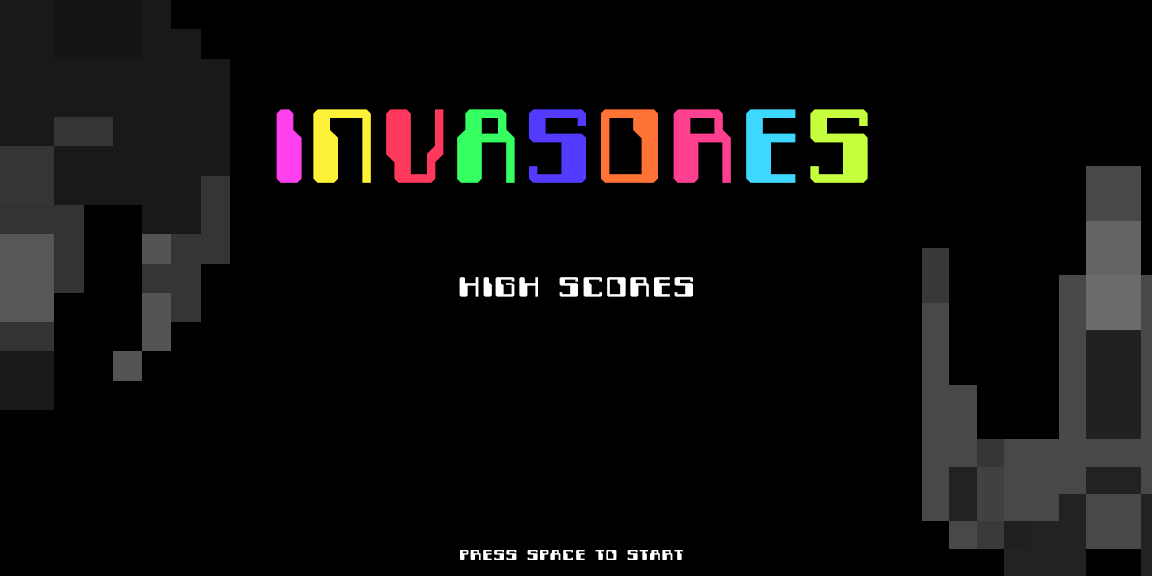
<style>
.page{position:relative;width:1152px;height:576px;background:#000000}
.page>*{position:absolute;margin:0}
.t1{font:122px "Computerfont";letter-spacing:0.035em;color:#ff40ef}
.t2{font:122px "Computerfont";letter-spacing:0.035em;color:#fef238}
.t3{font:122px "Computerfont";letter-spacing:0.035em;color:#ff385d}
.t4{font:122px "Computerfont";letter-spacing:0.035em;color:#36ff61}
.t5{font:122px "Computerfont";letter-spacing:0.035em;color:#523bff}
.t6{font:122px "Computerfont";letter-spacing:0.035em;color:#ff7336}
.t7{font:122px "Computerfont";letter-spacing:0.035em;color:#ff3f90}
.t8{font:122px "Computerfont";letter-spacing:0.035em;color:#3ed8ff}
.t9{font:122px "Computerfont";letter-spacing:0.035em;color:#c6ff3d}
.t10{font:32px "Computerfont";letter-spacing:0.035em;color:#ffffff;scale:1.23 1}
.t11{font:17px "Computerfont";letter-spacing:0.035em;color:#ffffff;scale:1.23 1}
</style>
<div class="page">
<p class="t1" style="left:276px;top:109px;width:592px;height:74px">I<span class="t2">N</span><span class="t3">V</span><span class="t4">A</span><span class="t5">S</span><span class="t6">O</span><span class="t7">R</span><span class="t8">E</span><span class="t9">S</span></p>
<p class="t10" style="left:459px;top:277px;width:234px;height:20px">HIGH SCORES</p>
<p class="t11" style="left:460px;top:550px;width:223px;height:10px">PRESS SPACE TO START</p>
</div>
